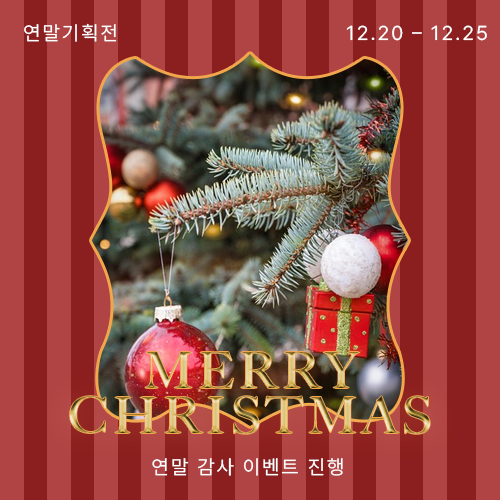
<style>
.page{position:relative;width:500px;height:500px;background:#b04444}
.page>*{position:absolute;margin:0}
.t1{font:20px "Pretendard-Regular";letter-spacing:0.1em;color:#ffffff;text-transform:uppercase}
</style>
<div class="page">
<p class="t1" style="left:24px;top:23px;width:93px;height:19px">연말기획전</p>
<p class="t1" style="left:346px;top:25px;width:141px;height:16px">12.20 – 12.25</p>
<p class="t1" style="left:152px;top:458px;width:191px;height:18px">연말 감사 이벤트 진행</p>
</div>
